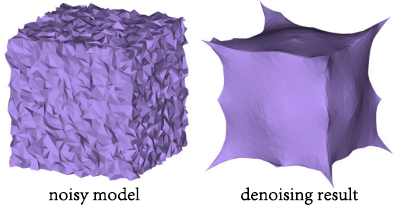
<style>
.page{position:relative;width:400px;height:210px;background:#ffffff}
.page>*{position:absolute;margin:0}
.t1{font:18px "AdobeSongStd-Light";color:#000000;font-weight:bold}
</style>
<div class="page">
<p class="t1" style="left:49px;top:187px;width:91px;height:18px">noisy model</p>
<p class="t1" style="left:241px;top:187px;width:118px;height:18px">denoising result</p>
</div>
